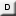
<style>
.page{position:relative;width:16px;height:16px;background:#ededed}
.page>*{position:absolute;margin:0}
.t1{font:8px "ArialMT";color:#000000}
</style>
<div class="page">
<p class="t1" style="left:5px;top:4px;width:5px;height:6px">D</p>
</div>
